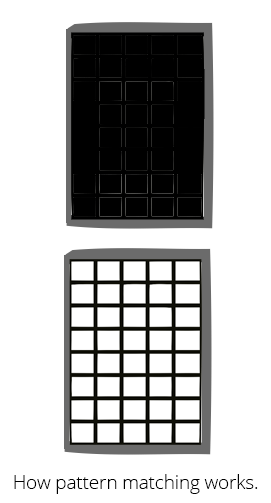
<style>
.page{position:relative;width:271px;height:503px;background:#ffffff}
.page>*{position:absolute;margin:0}
.t1{font:18.7px "OpenSans-Light";color:#000000}
</style>
<div class="page">
<p class="t1" style="left:14px;top:474px;width:244px;height:20px">How pattern matching works.</p>
</div>
